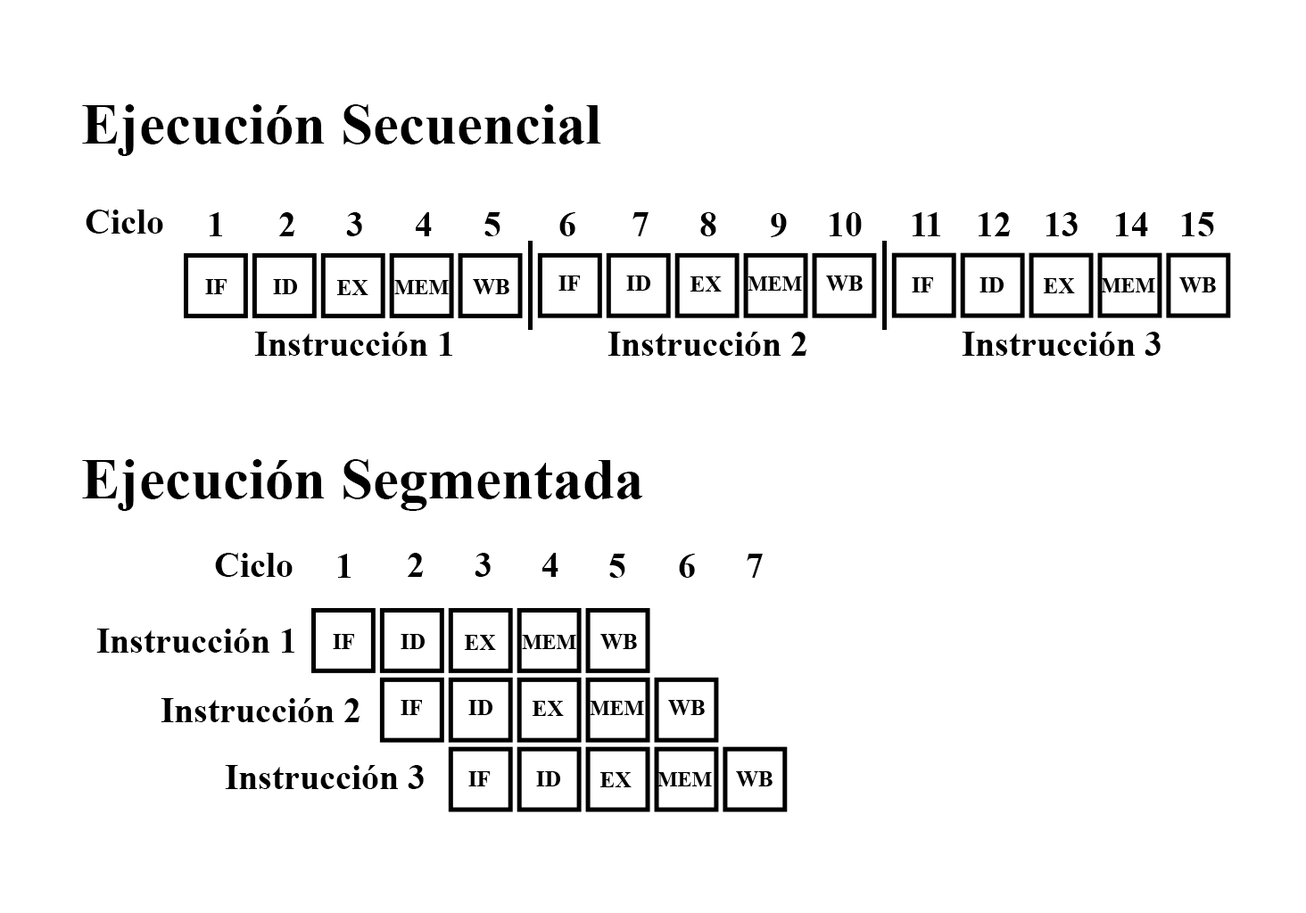
<style>
.page{position:relative;width:1306px;height:913px;background:#ffffff}
.page>*{position:absolute;margin:0}
.t1{font:58px "TimesNewRomanPS-BoldMT";color:#000000}
.t2{font:35.7px "TimesNewRomanPS-BoldMT";color:#000000}
</style>
<div class="page">
<p class="t1" style="left:82px;top:104px;width:519px;height:52px">Ejecución Secuencial</p>
<p class="t2" style="left:86px;top:210px;width:77px;height:24px">Ciclo</p>
<p class="t2" style="left:209px;top:212px;width:13px;height:24px">1</p>
<p class="t2" style="left:279px;top:212px;width:16px;height:24px">2</p>
<p class="t2" style="left:346px;top:212px;width:16px;height:24px">3</p>
<p class="t2" style="left:416px;top:212px;width:16px;height:24px">4</p>
<p class="t2" style="left:484px;top:212px;width:16px;height:24px">5</p>
<p class="t2" style="left:559px;top:212px;width:16px;height:24px">6</p>
<p class="t2" style="left:632px;top:212px;width:16px;height:24px">7</p>
<p class="t2" style="left:700px;top:212px;width:16px;height:24px">8</p>
<p class="t2" style="left:771px;top:213px;width:16px;height:24px">9</p>
<p class="t2" style="left:829px;top:212px;width:33px;height:24px">10</p>
<p class="t2" style="left:911px;top:212px;width:29px;height:24px">11</p>
<p class="t2" style="left:977px;top:212px;width:33px;height:24px">12</p>
<p class="t2" style="left:1045px;top:212px;width:32px;height:24px">13</p>
<p class="t2" style="left:1115px;top:212px;width:33px;height:24px">14</p>
<p class="t2" style="left:1181px;top:212px;width:33px;height:24px">15</p>
<p class="t2" style="left:254px;top:332px;width:198px;height:24px">Instrucción 1</p>
<p class="t2" style="left:607px;top:332px;width:200px;height:24px">Instrucción 2</p>
<p class="t2" style="left:961px;top:332px;width:199px;height:24px">Instrucción 3</p>
<p class="t1" style="left:82px;top:459px;width:561px;height:52px">Ejecución Segmentada</p>
<p class="t2" style="left:215px;top:553px;width:78px;height:24px">Ciclo</p>
<p class="t2" style="left:337px;top:554px;width:14px;height:24px">1</p>
<p class="t2" style="left:408px;top:553px;width:16px;height:24px">2</p>
<p class="t2" style="left:474px;top:553px;width:17px;height:24px">3</p>
<p class="t2" style="left:542px;top:553px;width:16px;height:24px">4</p>
<p class="t2" style="left:609px;top:554px;width:16px;height:24px">5</p>
<p class="t2" style="left:679px;top:554px;width:16px;height:24px">6</p>
<p class="t2" style="left:746px;top:554px;width:17px;height:24px">7</p>
<p class="t2" style="left:96px;top:629px;width:198px;height:24px">Instrucción 1</p>
<p class="t2" style="left:161px;top:698px;width:199px;height:24px">Instrucción 2</p>
<p class="t2" style="left:225px;top:765px;width:199px;height:24px">Instrucción 3</p>
</div>
